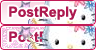
<style>
.page{position:relative;width:96px;height:50px}
.page>*{position:absolute;margin:0}
.t1{font:14px "Arial-BoldMT";color:#ad194f}
.t2{font:14px "Arial-BoldMT"}
</style>
<div class="page">
<p class="t1" style="left:9px;top:6px;width:68px;height:14px">PostReply</p>
<p class="t2" style="left:9px;top:31px;width:68px;height:14px">PostReply</p>
</div>
